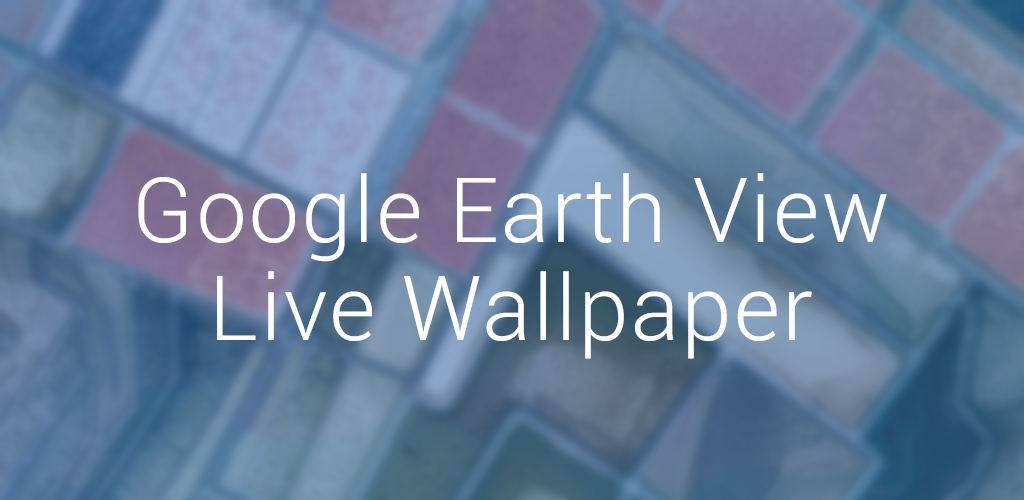
<style>
.page{position:relative;width:1024px;height:500px}
.page>*{position:absolute;margin:0}
.t1{font:90px/40px "Roboto-Light";letter-spacing:0.025em;color:#ffffff}
</style>
<div class="page">
<p class="t1" style="left:138px;top:173px;width:749px;height:186px;text-align:center">Google Earth View<br><br>Live Wallpaper</p>
</div>
